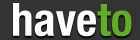
<style>
.page{position:relative;width:140px;height:40px;background:#333333}
.page>*{position:absolute;margin:0}
.t1{font:45.8px "HelveticaNeue-CondensedBold";color:#fefdfd}
.t2{font:45.8px "HelveticaNeue-CondensedBold";color:#61ae24}
</style>
<div class="page">
<p class="t1" style="left:13px;top:3px;width:119px;height:34px">have<span class="t2">to</span></p>
</div>
